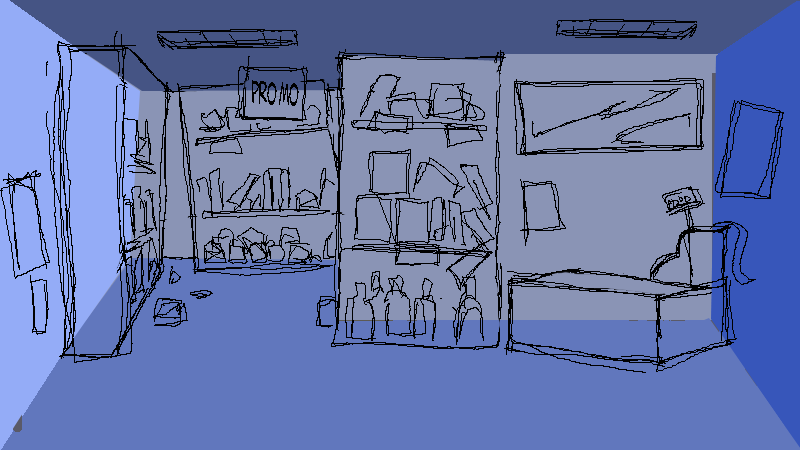
<style>
.page{position:relative;width:800px;height:450px;background:#8a94b5}
.page>*{position:absolute;margin:0}
.t1{font:32.6px "laCartoonerie";color:#000000;scale:0.41 1}
</style>
<div class="page">
<p class="t1" style="left:252px;top:80px;width:47px;height:26px;rotate:2deg">PROMO</p>
</div>
